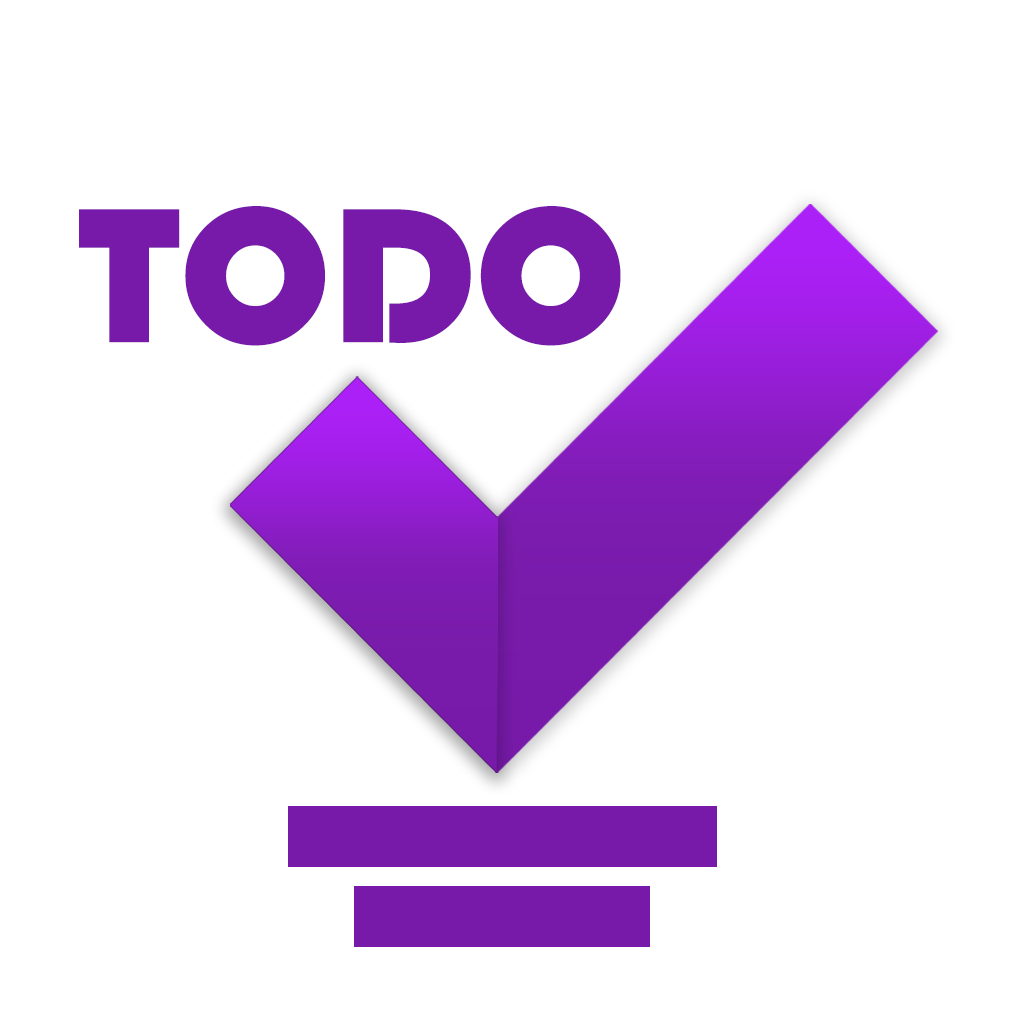
<style>
.page{position:relative;width:1024px;height:1024px;background:#ffffff}
.page>*{position:absolute;margin:0}
.t1{font:198.9px "Bauhaus93";color:#771aa9}
</style>
<div class="page">
<p class="t1" style="left:79px;top:206px;width:542px;height:140px">TODO</p>
</div>
